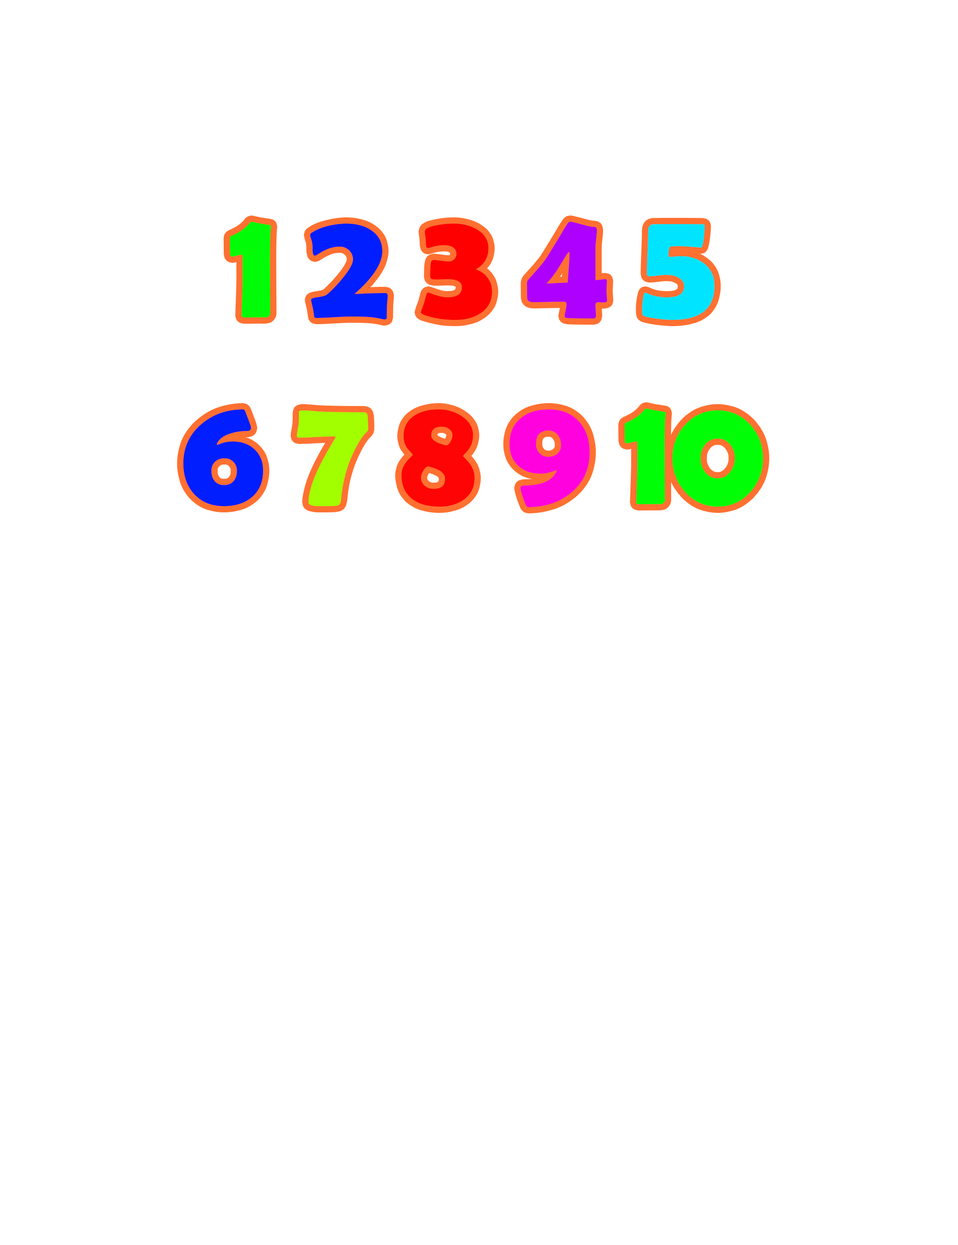
<style>
.page{position:relative;width:958px;height:1245px;background:#ffffff}
.page>*{position:absolute;margin:0}
.t1{font:155.6px "BerlinSansFBDemi-Bold";letter-spacing:-0.03em;color:#00ff06}
.t2{font:155.6px "BerlinSansFBDemi-Bold";letter-spacing:-0.03em;color:#00fc06}
.t3{font:155.6px "BerlinSansFBDemi-Bold";letter-spacing:-0.03em;color:#001eff}
.t4{font:155.6px "BerlinSansFBDemi-Bold";letter-spacing:-0.03em;color:#ff0000}
.t5{font:155.6px "BerlinSansFBDemi-Bold";letter-spacing:-0.03em;color:#ae00ff}
.t6{font:155.6px "BerlinSansFBDemi-Bold";letter-spacing:-0.03em;color:#00e4ff}
.t7{font:155.6px "BerlinSansFBDemi-Bold";letter-spacing:-0.03em;color:#a2ff00}
.t8{font:155.6px "BerlinSansFBDemi-Bold";letter-spacing:-0.03em;color:#ff0404}
.t9{font:155.6px "BerlinSansFBDemi-Bold";letter-spacing:-0.03em;color:#ff00de}
</style>
<div class="page">
<p class="t1" style="left:183px;top:221px;width:580px;height:286px;text-align:center"><span class="t2">1 </span><span class="t3">2 </span><span class="t4">3 </span><span class="t5">4 </span><span class="t6">5</span><span class="t3"> <br>6 </span><span class="t7">7 </span><span class="t8">8 </span><span class="t9">9 </span>10</p>
</div>
